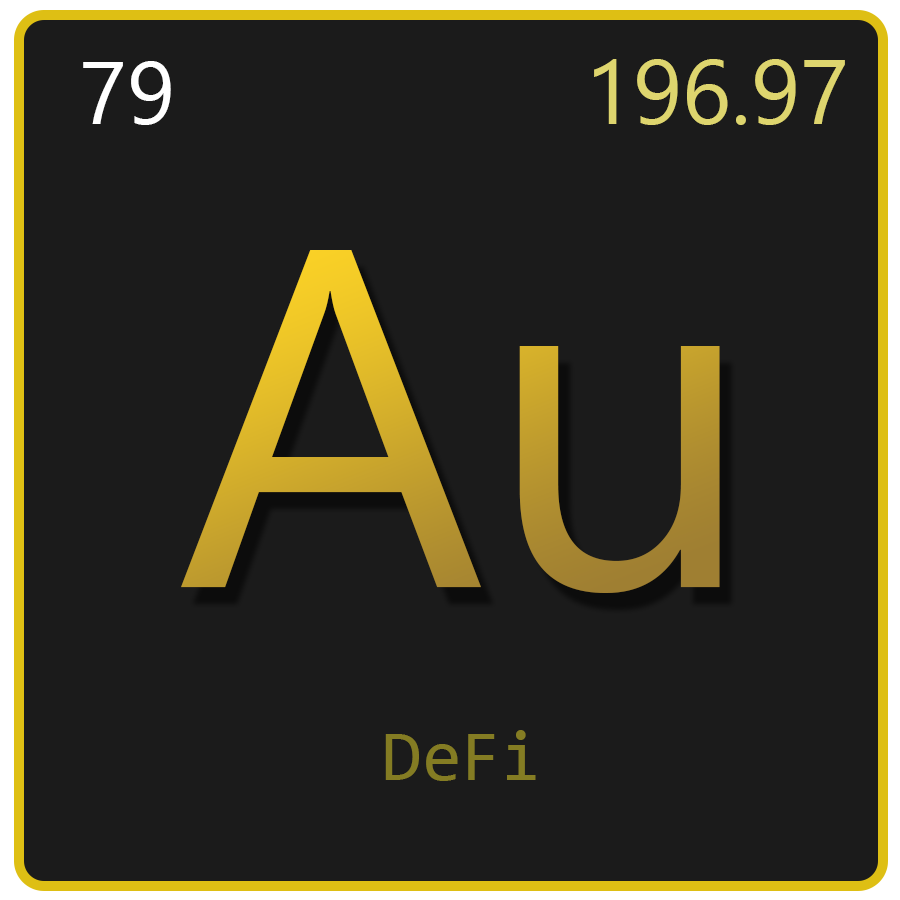
<style>
.page{position:relative;width:900px;height:900px;background:#1b1b1b}
.page>*{position:absolute;margin:0}
.t1{font:89px "Leelawadee";color:#ffffff}
.t2{font:91px "Leelawadee";color:#ded56e}
.t3{font:481px "Leelawadee"}
.t4{font:72px "Consolas";color:#847c23}
</style>
<div class="page">
<p class="t1" style="left:83px;top:61px;width:88px;height:64px">79</p>
<p class="t2" style="left:594px;top:59px;width:251px;height:66px">196.97</p>
<p class="t3" style="left:181px;top:250px;width:539px;height:343px">Au</p>
<p class="t4" style="left:385px;top:730px;width:151px;height:51px">DeFi</p>
</div>
